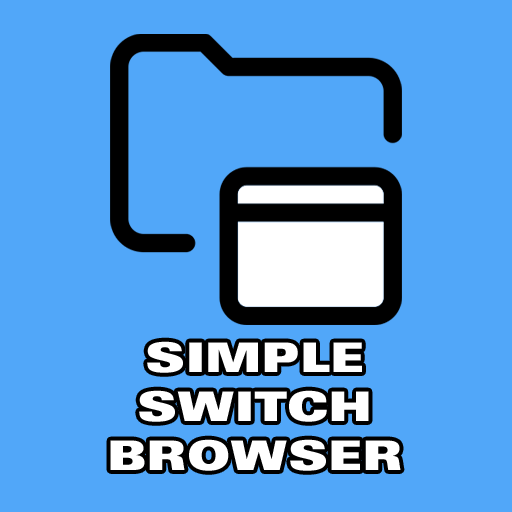
<style>
.page{position:relative;width:512px;height:512px;background:#51a7f9}
.page>*{position:absolute;margin:0}
.t1{font:40.8px "UniversLT-ExtraBlackExt";color:#ffffff}
</style>
<div class="page">
<p class="t1" style="left:110px;top:341px;width:291px;height:130px;text-align:center">SIMPLE<br>SWITCH<br>BROWSER</p>
</div>
